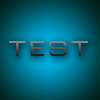
<style>
.page{position:relative;width:100px;height:100px}
.page>*{position:absolute;margin:0}
.t1{font:24px "Acens";letter-spacing:0.18em}
</style>
<div class="page">
<p class="t1" style="left:9px;top:41px;width:79px;height:15px">TEST</p>
</div>
